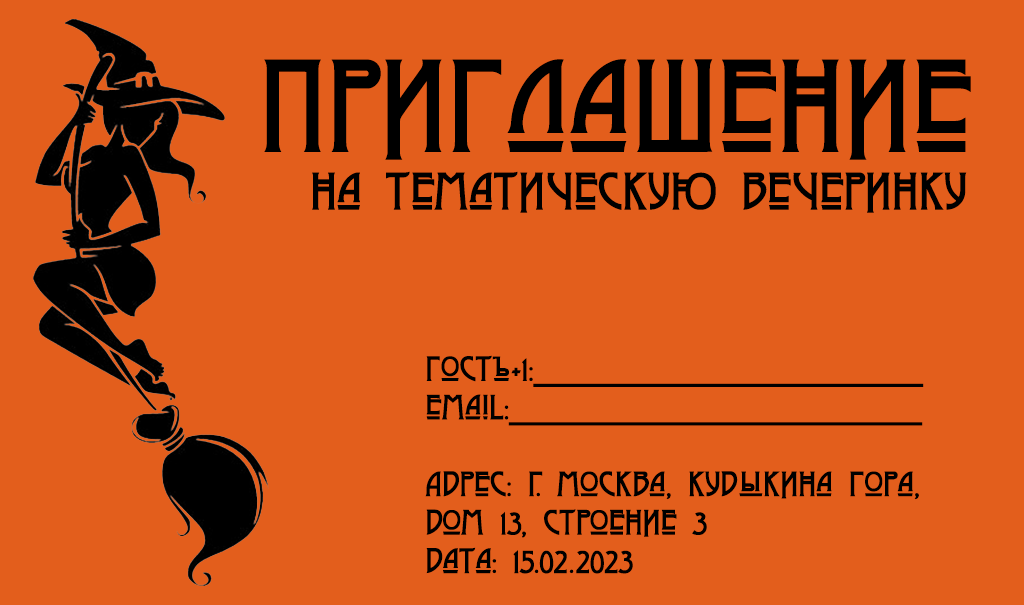
<style>
.page{position:relative;width:1024px;height:605px;background:#e35e1c}
.page>*{position:absolute;margin:0}
.t1{font:48px "ModernoThree";color:#000000}
.t2{font:120px "ModernoThree";color:#000000}
.t3{font:32px "ModernoThree";color:#000000}
</style>
<div class="page">
<p class="t1" style="left:264px;top:59px;width:707px;height:154px;text-align:center"><span class="t2">Приглашение<br></span>  на тематическую вечеринку</p>
<p class="t3" style="left:425px;top:355px;width:499px;height:219px">Гость+1:__________________________________________________<br>email:_____________________________________________________<br><br>Адрес: г. Москва, Кудыкина гора,<br>Дом 13, Строение 3<br>Дата: 15.02.2023</p>
</div>
